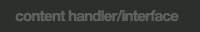
<style>
.page{position:relative;width:200px;height:32px;background:#2d2f2d}
.page>*{position:absolute;margin:0}
.t1{font:15px "HelveticaNeue-Bold";letter-spacing:-0.05em;color:#5f635f}
</style>
<div class="page">
<p class="t1" style="left:15px;top:10px;width:164px;height:12px">content handler/interface</p>
</div>
